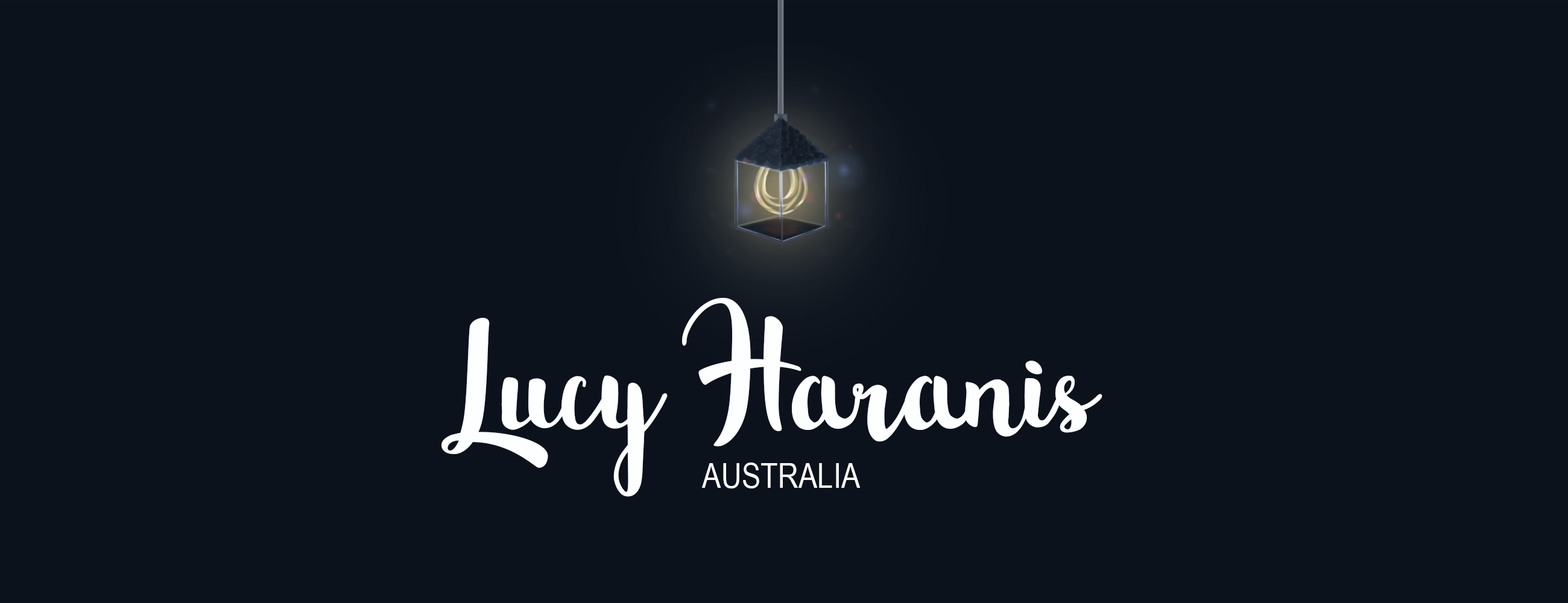
<style>
.page{position:relative;width:1568px;height:603px;background:#0b121c}
.page>*{position:absolute;margin:0}
.t1{font:195px "NorthernLights-Script";color:#fdfeff}
.t2{font:130px "BeyondTheMountains";color:#fdfeff}
.t3{font:34.7px "ArialNarrow";color:#fdfeff}
</style>
<div class="page">
<p class="t1" style="left:441px;top:298px;width:661px;height:199px"><span class="t2">L</span>ucy <span class="t2">H</span>aranis</p>
<p class="t3" style="left:702px;top:463px;width:159px;height:25px">AUSTRALIA</p>
</div>
